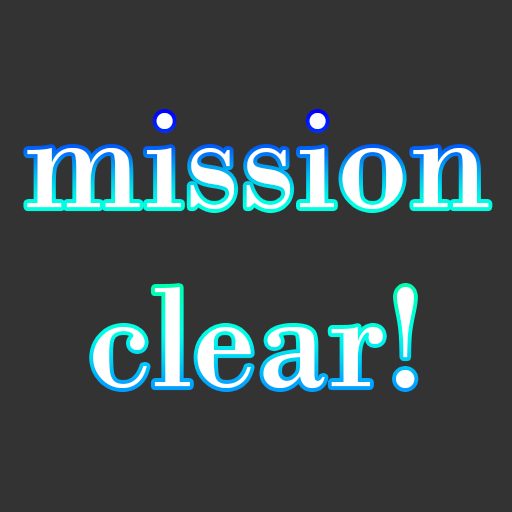
<style>
.page{position:relative;width:512px;height:512px;background:#333333}
.page>*{position:absolute;margin:0}
.t1{font:149.1px "BodoniMT";color:#ffffff}
</style>
<div class="page">
<p class="t1" style="left:27px;top:113px;width:462px;height:275px;text-align:center">mission<br>clear!</p>
</div>
